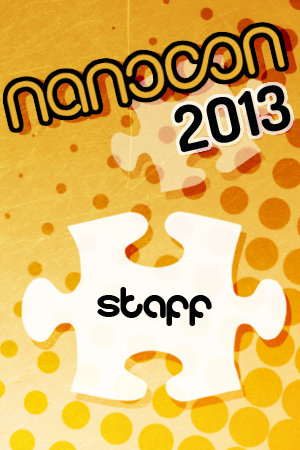
<style>
.page{position:relative;width:300px;height:450px}
.page>*{position:absolute;margin:0}
.t1{font:62.5px "Dosis-Bold";color:#000405}
.t2{font:41.7px "gitchgitch";color:#000000}
</style>
<div class="page">
<p class="t1" style="left:174px;top:85px;width:117px;height:67px;rotate:-13deg">2O13</p>
<p class="t2" style="left:97px;top:287px;width:115px;height:39px">staff</p>
</div>
